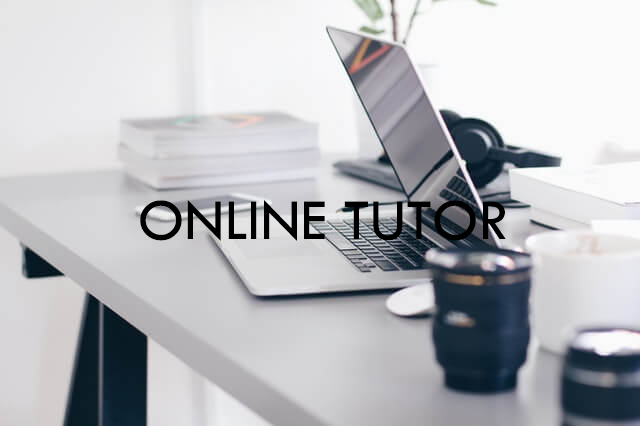
<style>
.page{position:relative;width:640px;height:426px}
.page>*{position:absolute;margin:0}
.t1{font:60px "TwCenMT-Regular";color:#000000}
</style>
<div class="page">
<p class="t1" style="left:140px;top:200px;width:366px;height:41px">ONLINE TUTOR</p>
</div>
